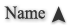
<style>
.page{position:relative;width:70px;height:25px;background:#ffffff}
.page>*{position:absolute;margin:0}
.t1{font:18px "TimesNewRomanPSMT";color:#333333;scale:0.94 1}
</style>
<div class="page">
<p class="t1" style="left:4px;top:6px;width:41px;height:13px">Name</p>
</div>
